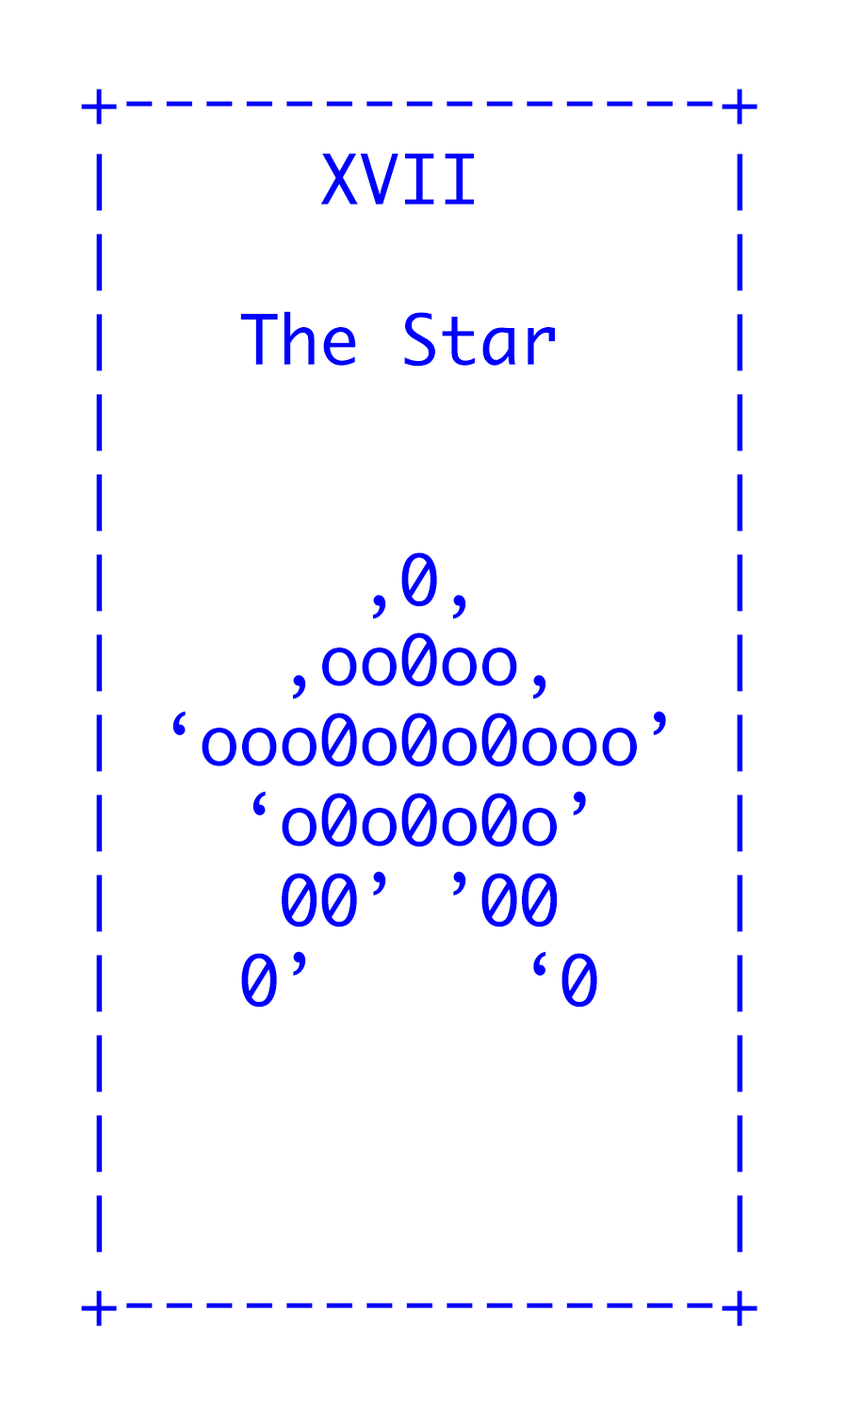
<style>
.page{position:relative;width:845px;height:1411px;background:#ffffff}
.page>*{position:absolute;margin:0}
.t1{font:66.7px "Monaco";color:#0000ff}
</style>
<div class="page">
<p class="t1" style="left:81px;top:89px;width:677px;height:1237px">+---------------+<br>│     XVII      │<br>│               │<br>│   The Star    │<br>│               │<br>│               │<br>│      ,0,      │<br>│    ,oo0oo,    │ <br>│ ‘ooo0o0o0ooo’ │  <br>│   ‘o0o0o0o’   │ <br>│    00’ ’00    │  <br>│   0’     ‘0   │ <br>│               │<br>│               │<br>│               │<br>+---------------+</p>
</div>
